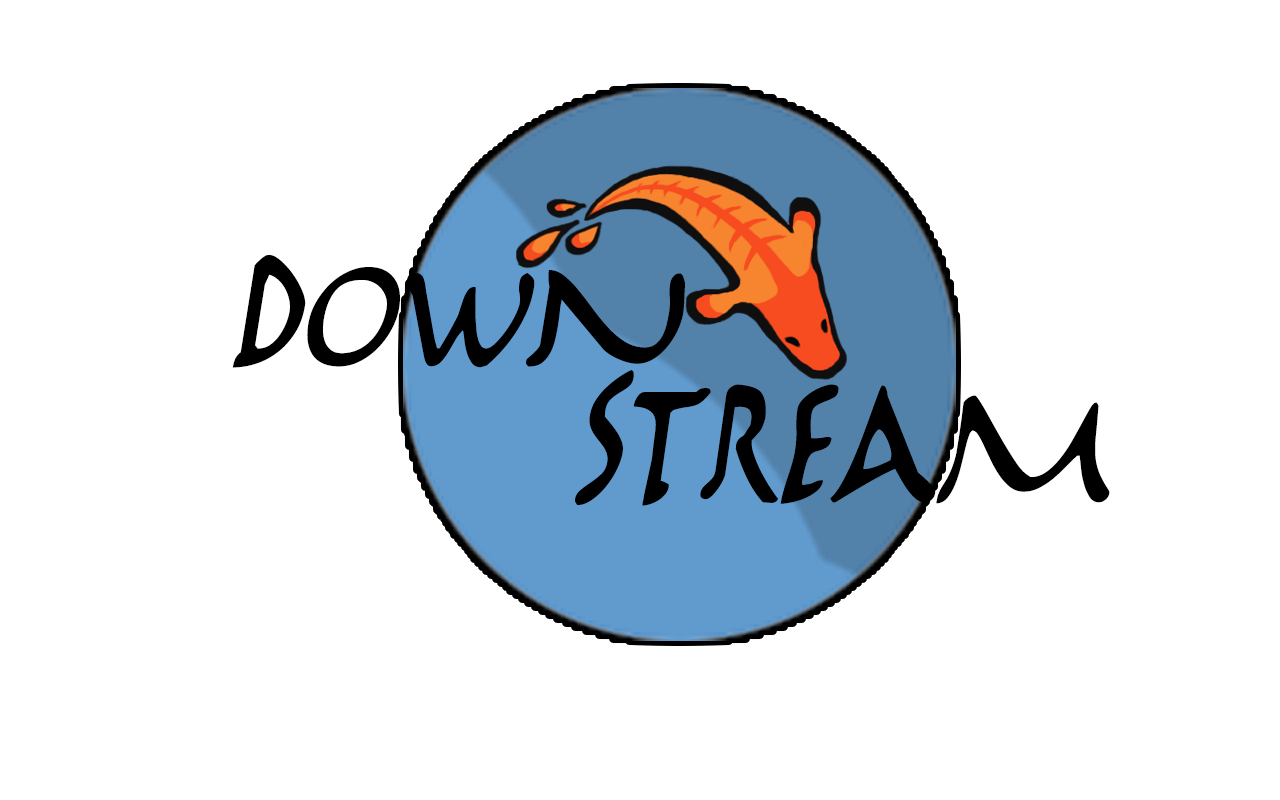
<style>
.page{position:relative;width:1280px;height:800px;background:#ffffff}
.page>*{position:absolute;margin:0}
.t1{font:255.1px "Marathon";letter-spacing:-0.005em;color:#000000;font-style:italic;scale:0.91 1}
.t2{font:284px "Marathon";letter-spacing:-0.005em;color:#000000;font-style:italic;scale:0.81 1}
</style>
<div class="page">
<p class="t1" style="left:232px;top:255px;width:453px;height:113px">Down</p>
<p class="t2" style="left:575px;top:370px;width:535px;height:136px">Stream</p>
</div>
